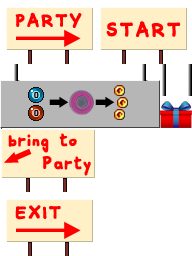
<style>
.page{position:relative;width:192px;height:256px;background:#ffffff}
.page>*{position:absolute;margin:0}
.t1{font:18px "ComiquitaSans";color:#ff0000;font-weight:bold}
.t2{font:20px "ComiquitaSans";color:#ff0000;font-weight:bold}
.t3{font:8px "ArialMT";color:#010101;font-weight:bold}
</style>
<div class="page">
<p class="t1" style="left:15px;top:12px;width:67px;height:16px">PARTY</p>
<p class="t2" style="left:106px;top:21px;width:75px;height:17px">START</p>
<p class="t3" style="left:34px;top:92px;width:5px;height:6px">0</p>
<p class="t3" style="left:34px;top:110px;width:5px;height:6px">0</p>
<p class="t1" style="left:8px;top:133px;width:69px;height:20px">bring to</p>
<p class="t1" style="left:42px;top:156px;width:49px;height:20px">Party</p>
<p class="t1" style="left:15px;top:205px;width:46px;height:15px">EXIT</p>
</div>
